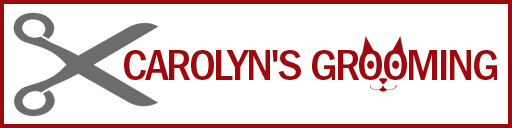
<style>
.page{position:relative;width:512px;height:128px;background:#ffffff}
.page>*{position:absolute;margin:0}
.t1{font:43.2px "FranklinGothic-MedCnd";letter-spacing:-0.05em;color:#9d0a0e;scale:1.11 1}
</style>
<div class="page">
<p class="t1" style="left:124px;top:50px;width:373px;height:30px">CAROLYN'S GROOMING</p>
</div>
